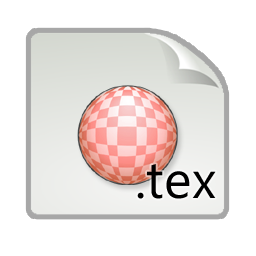
<style>
.page{position:relative;width:256px;height:256px;background:#ffffff}
.page>*{position:absolute;margin:0}
.t1{font:52.5px "Ebrima";color:#000000}
</style>
<div class="page">
<p class="t1" style="left:137px;top:164px;width:79px;height:35px">.tex</p>
</div>
